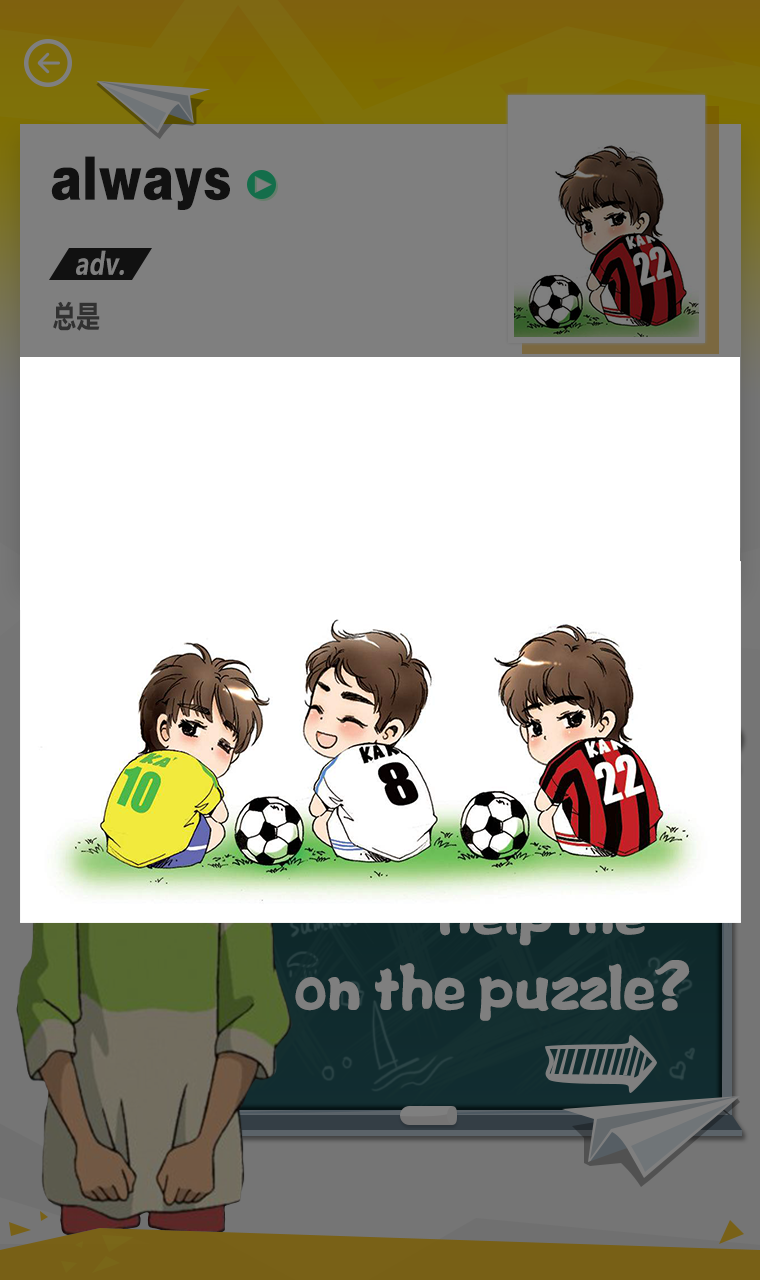
<style>
.page{position:relative;width:760px;height:1280px;background:#ffffff}
.page>*{position:absolute;margin:0}
.t1{font:60px "FZCCHJW--GB1-0";letter-spacing:0.01em;color:#232323;scale:0.78 1}
.t2{font:30px "MicrosoftYaHei-Bold";letter-spacing:0.01em;color:#7f7f7f;font-style:italic;scale:0.78 1}
.t3{font:30px "MicrosoftYaHei-Bold";letter-spacing:0.01em;color:#313131;scale:0.78 1}
.t4{font:60px "FZPWJW--GB1-0";letter-spacing:0.01em;color:#7f7f7f;scale:0.78 1}
</style>
<div class="page">
<p class="t1" style="left:51px;top:156px;width:179px;height:54px">always</p>
<p class="t2" style="left:76px;top:250px;width:48px;height:25px">adv.</p>
<p class="t3" style="left:53px;top:301px;width:47px;height:30px">总是</p>
<p class="t4" style="left:295px;top:960px;width:395px;height:61px">on the puzzle?</p>
</div>
